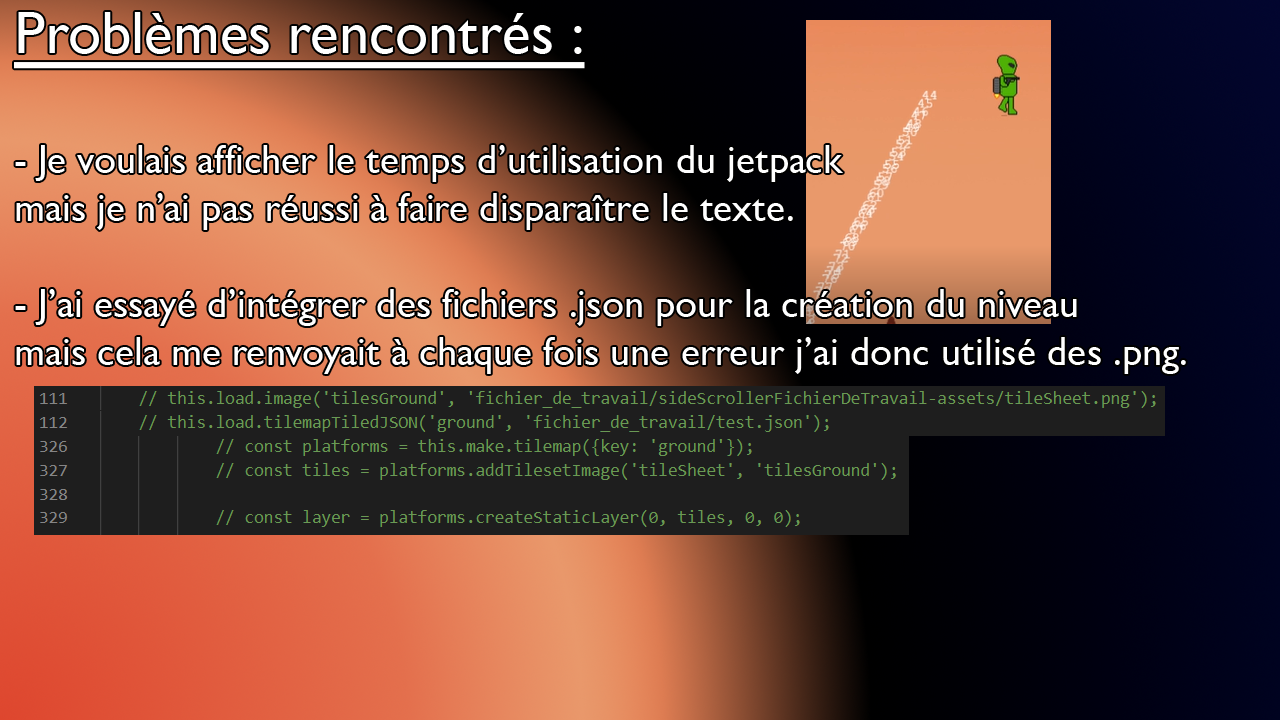
<style>
.page{position:relative;width:1280px;height:720px}
.page>*{position:absolute;margin:0}
.t1{font:40px "GillSansNova";color:#ffffff}
.t2{font:60px "GillSansNova";color:#ffffff;text-decoration:underline}
</style>
<div class="page">
<p class="t1" style="left:14px;top:12px;width:1172px;height:362px"><span class="t2">Problèmes rencontrés :<br><br></span>- Je voulais afficher le temps d’utilisation du jetpack <br>mais je n’ai pas réussi à faire disparaître le texte.<br><br>- J’ai essayé d’intégrer des fichiers .json pour la création du niveau<br>mais cela me renvoyait à chaque fois une erreur j’ai donc utilisé des .png.</p>
</div>
